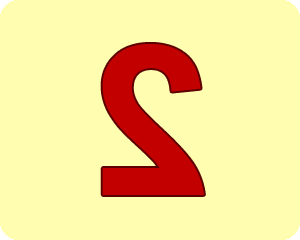
<style>
.page{position:relative;width:300px;height:240px;background:#fffdaf}
.page>*{position:absolute;margin:0}
.t1{font:210px "Arial-BoldMT";color:#c20000}
</style>
<div class="page">
<p class="t1" style="left:102px;top:44px;width:102px;height:151px;rotate:180deg">2</p>
</div>
